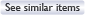
<style>
.page{position:relative;width:85px;height:15px;background:#e0e2ec}
.page>*{position:absolute;margin:0}
.t1{font:11px "GillSansMT";color:#3a3b3d}
</style>
<div class="page">
<p class="t1" style="left:5px;top:3px;width:75px;height:8px">See similar items</p>
</div>
